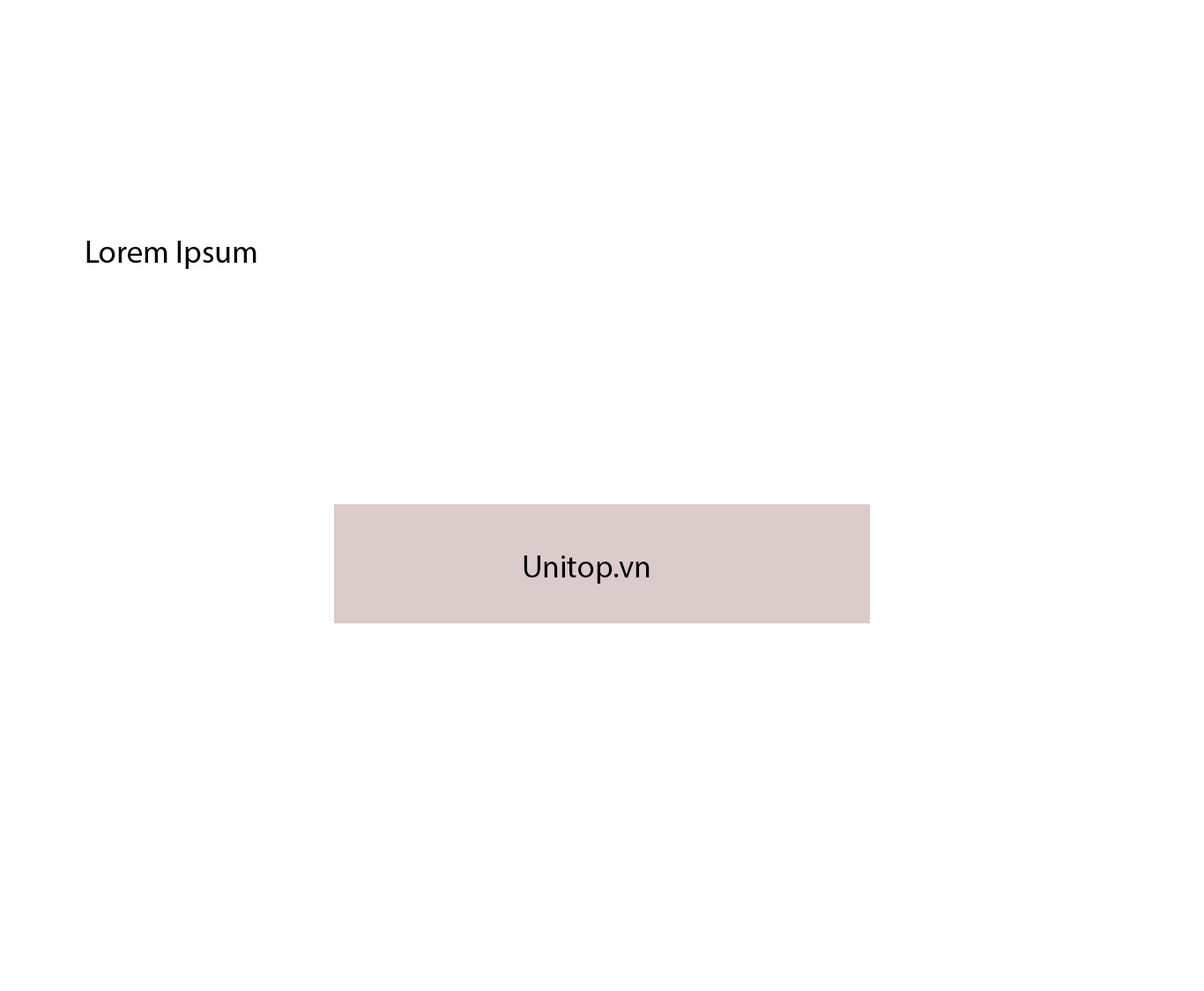
<style>
.page{position:relative;width:1204px;height:991px;background:#ffffff}
.page>*{position:absolute;margin:0}
.t1{font:31.7px "MyriadPro-Regular";color:#000000}
</style>
<div class="page">
<p class="t1" style="left:86px;top:241px;width:170px;height:28px">Lorem Ipsum</p>
<p class="t1" style="left:523px;top:555px;width:126px;height:28px">Unitop.vn</p>
</div>
